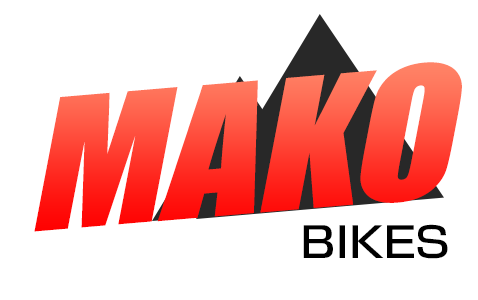
<style>
.page{position:relative;width:478px;height:300px;background:#ffffff}
.page>*{position:absolute;margin:0}
.t1{font:167px "Impact";font-style:italic;scale:1.11 1}
.t2{font:41.7px "ShinGoPro-Medium";color:#000000;scale:1.1 1}
</style>
<div class="page">
<p class="t1" style="left:34px;top:62px;width:428px;height:170px;rotate:-5deg">MAKO</p>
<p class="t2" style="left:303px;top:224px;width:145px;height:35px">BIKES</p>
</div>
